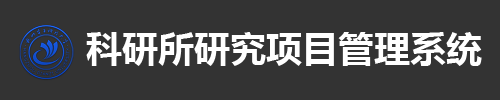
<style>
.page{position:relative;width:500px;height:100px;background:#333333}
.page>*{position:absolute;margin:0}
.t1{font:36px "MicrosoftYaHei-Bold";color:#ffffff}
</style>
<div class="page">
<p class="t1" style="left:86px;top:32px;width:396px;height:34px">科研所研究项目管理系统</p>
</div>
